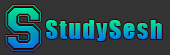
<style>
.page{position:relative;width:170px;height:55px;background:#333333}
.page>*{position:absolute;margin:0}
.t1{font:55px "CollegiateFLF";letter-spacing:0.07em}
.t2{font:24px "Impact";letter-spacing:0.07em}
</style>
<div class="page">
<p class="t1" style="left:5px;top:5px;width:36px;height:46px">S</p>
<p class="t2" style="left:46px;top:20px;width:116px;height:21px">StudySesh</p>
</div>
